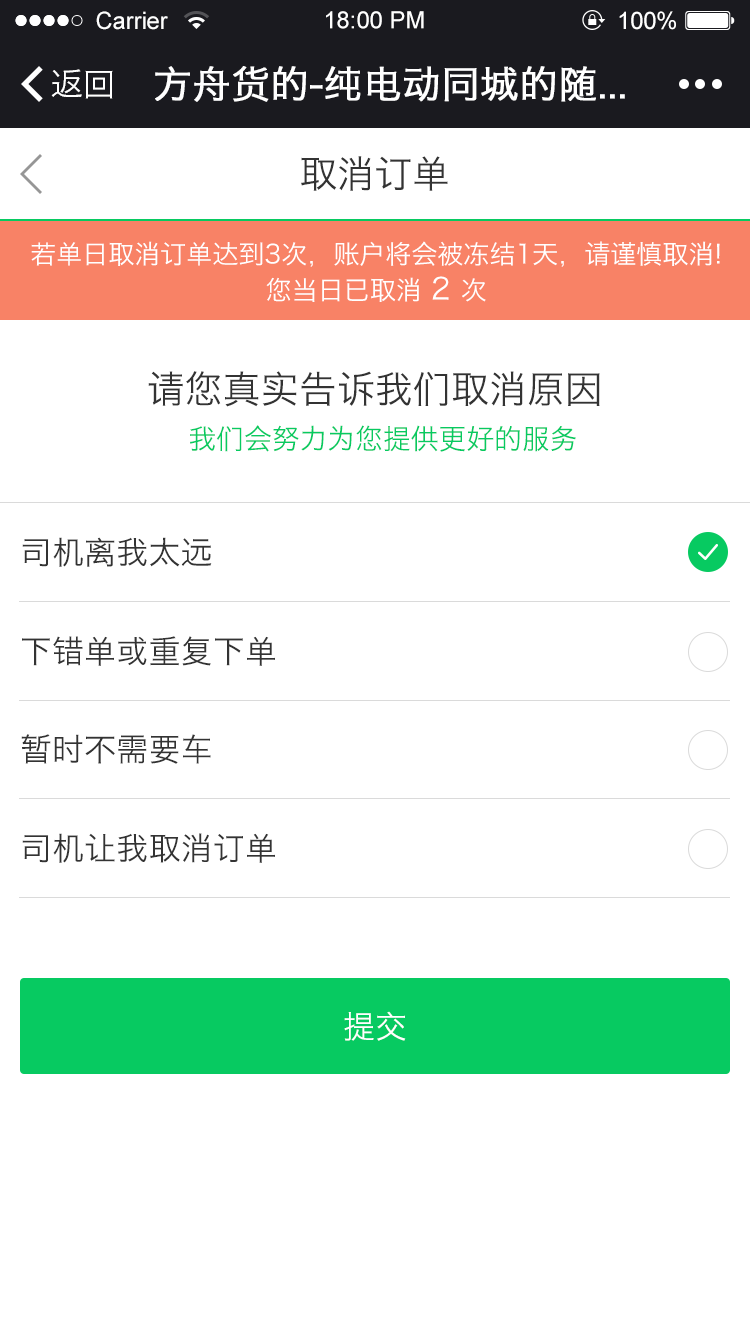
<style>
.page{position:relative;width:750px;height:1334px;background:#ffffff}
.page>*{position:absolute;margin:0}
.t1{font:24px "ArialMT";color:#fefefe}
.t2{font:23.7px "ArialMT";color:#ffffff}
.t3{font:24px "ArialMT";color:#ffffff}
.t4{font:32px "HiraginoSansGB-W3";color:#ffffff}
.t5{font:38px "HiraginoSansGB-W3";color:#ffffff;font-weight:bold}
.t6{font:38px "HiraginoSansGB-W3";color:#333333}
.t7{font:26px/36px "HiraginoSansGB-W3";color:#ffffff}
.t8{font:30px/36px "HiraginoSansGB-W3";color:#ffffff}
.t9{font:28px "HiraginoSansGB-W3";color:#07ca61}
.t10{font:32px "HiraginoSansGB-W3";color:#333333}
</style>
<div class="page">
<p class="t1" style="left:96px;top:11px;width:72px;height:19px">Carrier</p>
<p class="t2" style="left:326px;top:11px;width:98px;height:18px">18:00 PM</p>
<p class="t3" style="left:619px;top:11px;width:57px;height:19px">100%</p>
<p class="t4" style="left:51px;top:69px;width:62px;height:30px">返回</p>
<p class="t5" style="left:155px;top:66px;width:470px;height:36px">方舟货的-纯电动同城的随...</p>
<p class="t6" style="left:301px;top:156px;width:147px;height:35px">取消订单</p>
<p class="t7" style="left:31px;top:241px;width:689px;height:61px;text-align:center">若单日取消订单达到3次，账户将会被冻结1天，请谨慎取消!<br>您当日已取消 <span class="t8">2 </span>次</p>
<p class="t6" style="left:148px;top:371px;width:452px;height:36px">请您真实告诉我们取消原因</p>
<p class="t9" style="left:190px;top:425px;width:386px;height:27px">我们会努力为您提供更好的服务</p>
<p class="t10" style="left:22px;top:537px;width:190px;height:30px">司机离我太远</p>
<p class="t10" style="left:22px;top:636px;width:253px;height:30px">下错单或重复下单</p>
<p class="t10" style="left:21px;top:734px;width:190px;height:30px">暂时不需要车</p>
<p class="t10" style="left:22px;top:833px;width:253px;height:30px">司机让我取消订单</p>
<p class="t4" style="left:344px;top:1011px;width:62px;height:30px">提交</p>
</div>
